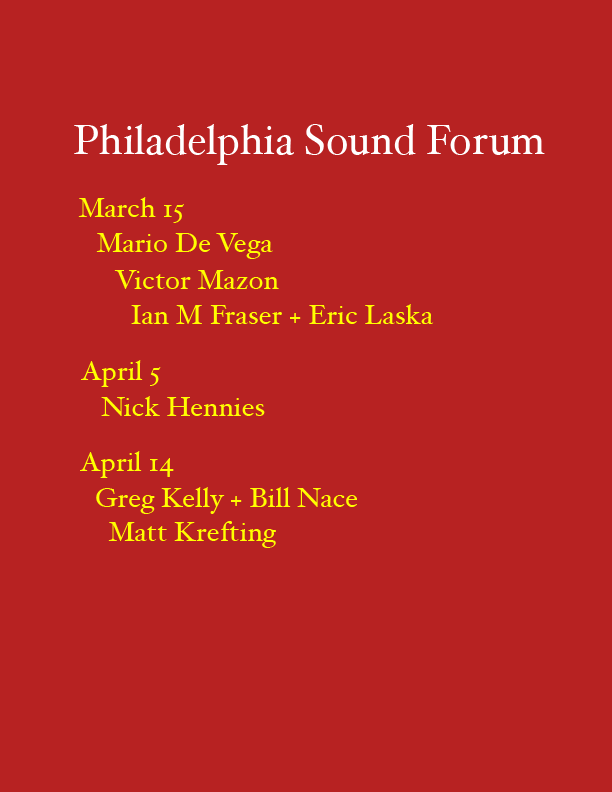
<style>
.page{position:relative;width:612px;height:792px;background:#b72222}
.page>*{position:absolute;margin:0}
.t1{font:72px "HoeflerText-Regular";color:#ffffff}
.t2{font:48px "HoeflerText-Regular";color:#ffff00}
</style>
<div class="page">
<p class="t1" style="left:74px;top:124px;width:471px;height:41px">Philadelphia Sound Forum</p>
<p class="t2" style="left:78px;top:197px;width:106px;height:26px">March 15</p>
<p class="t2" style="left:96px;top:233px;width:177px;height:26px">Mario De Vega</p>
<p class="t2" style="left:114px;top:270px;width:165px;height:19px">Victor Mazon</p>
<p class="t2" style="left:131px;top:304px;width:303px;height:20px">Ian M Fraser + Eric Laska</p>
<p class="t2" style="left:81px;top:360px;width:80px;height:27px">April 5</p>
<p class="t2" style="left:101px;top:396px;width:164px;height:20px">Nick Hennies</p>
<p class="t2" style="left:80px;top:451px;width:94px;height:27px">April 14</p>
<p class="t2" style="left:96px;top:487px;width:261px;height:27px">Greg Kelly + Bill Nace</p>
<p class="t2" style="left:108px;top:521px;width:168px;height:27px">Matt Krefting</p>
</div>
